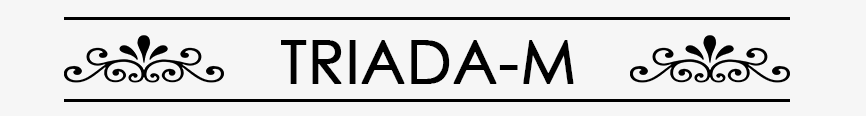
<style>
.page{position:relative;width:866px;height:116px;background:#f6f6f6}
.page>*{position:absolute;margin:0}
.t1{font:60px "CenturyGothic";color:#000000;font-weight:bold}
</style>
<div class="page">
<p class="t1" style="left:281px;top:40px;width:293px;height:44px">TRIADA-M</p>
</div>
